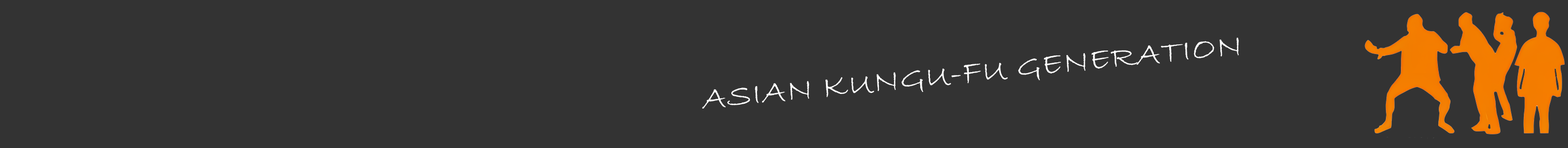
<style>
.page{position:relative;width:1568px;height:148px;background:#333333}
.page>*{position:absolute;margin:0}
.t1{font:31.3px "BradleyHandITC";color:#ffffff;font-weight:bold;scale:1.08 1}
</style>
<div class="page">
<p class="t1" style="left:702px;top:37px;width:537px;height:71px;rotate:-6deg">ASIAN KUNGU-FU GENERATION</p>
</div>
